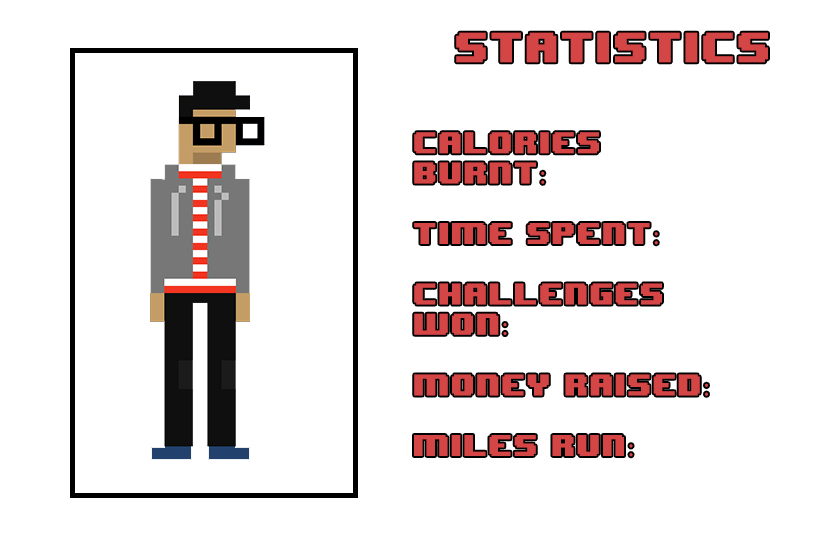
<style>
.page{position:relative;width:835px;height:556px;background:#ffffff}
.page>*{position:absolute;margin:0}
.t1{font:25.2px "8BITWONDERNominal";color:#d44545}
.t2{font:35.3px "8BITWONDERNominal";color:#d44545}
.t3{font:25.2px "MyriadPro-Regular";color:#d44545}
</style>
<div class="page">
<p class="t1" style="left:414px;top:32px;width:354px;height:425px;text-align:center"><span class="t2">statistics<br></span><br><br>CALORIES<br>BURNT<span class="t3">:</span><br><br>TIME SPENT<span class="t3">:</span><br><br>CHALLENGES<br>WON<span class="t3">:<br><br></span>MONEY RAISED<span class="t3">:</span><br><br>miles run<span class="t3">:</span></p>
</div>
